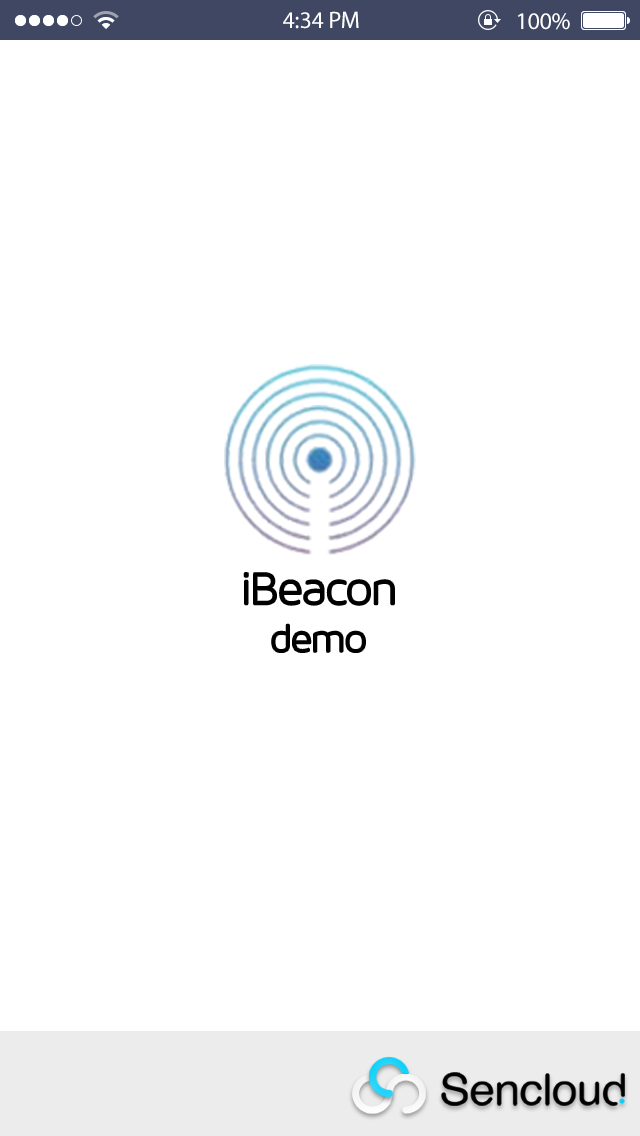
<style>
.page{position:relative;width:640px;height:1136px;background:#ffffff}
.page>*{position:absolute;margin:0}
.t1{font:24px "MyriadPro-Regular";color:#ffffff}
.t2{font:48px "MavenProLight300-Regular";letter-spacing:-0.025em;color:#000000}
.t3{font:40px "MavenProLight300-Regular";letter-spacing:-0.025em;color:#000000}
</style>
<div class="page">
<p class="t1" style="left:283px;top:11px;width:76px;height:18px">4:34 PM</p>
<p class="t1" style="left:518px;top:13px;width:52px;height:17px">100%</p>
<p class="t2" style="left:244px;top:573px;width:150px;height:32px">iBeacon</p>
<p class="t3" style="left:272px;top:624px;width:93px;height:28px">demo</p>
</div>
